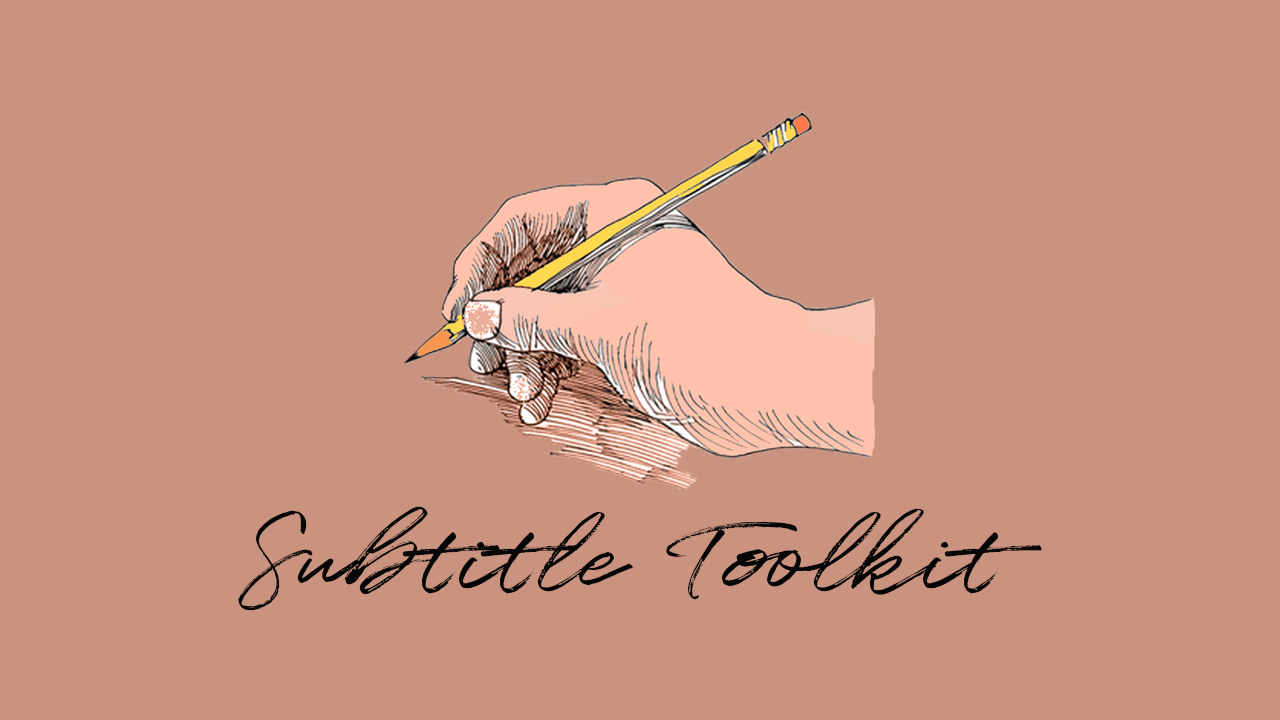
<style>
.page{position:relative;width:1280px;height:720px;background:#c9937f}
.page>*{position:absolute;margin:0}
.t1{font:110px "Quentin";color:#060606}
</style>
<div class="page">
<p class="t1" style="left:238px;top:506px;width:804px;height:105px">Subtitle Toolkit</p>
</div>
